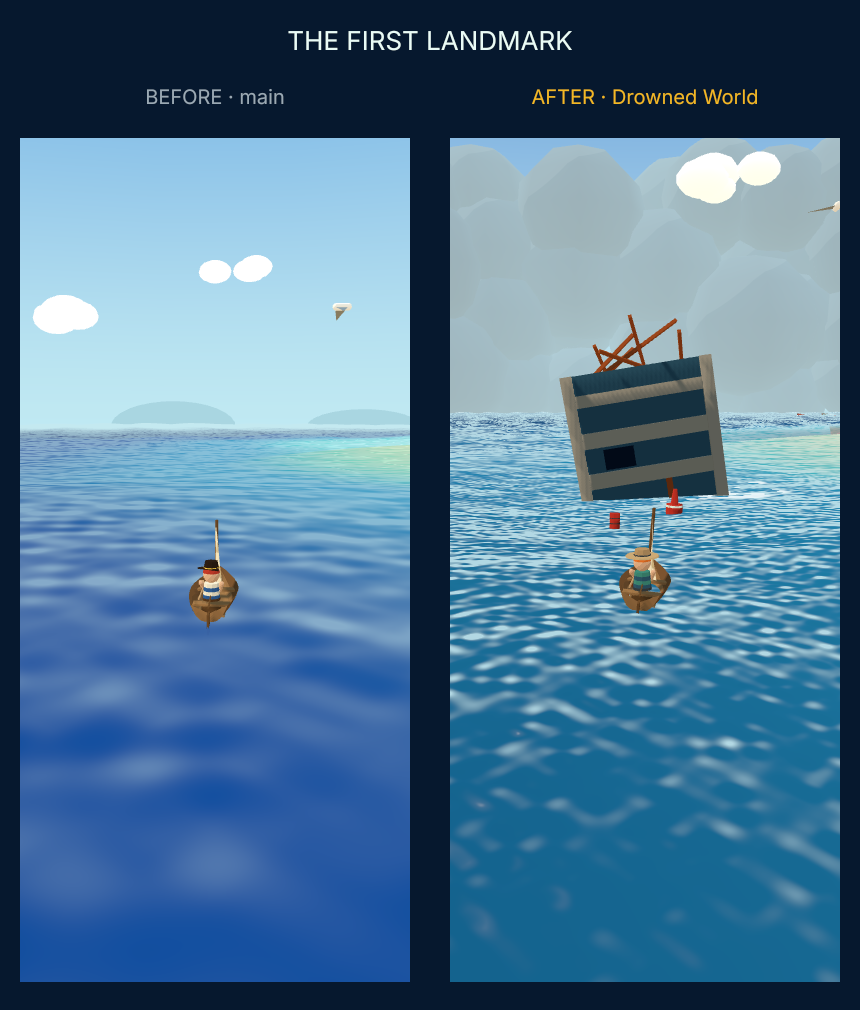
<style>
.page{position:relative;width:860px;height:1010px;background:#06182e}
.page>*{position:absolute;margin:0}
.t1{font:26px "Nunito-Regular";color:#e9fbf6}
.t2{font:20px "Nunito-Regular";color:#9aa9b4}
.t3{font:20px "Nunito-Regular";color:#f2b825}
</style>
<div class="page">
<p class="t1" style="left:287px;top:30px;width:286px;height:22px">THE FIRST LANDMARK</p>
<p class="t2" style="left:146px;top:88px;width:139px;height:18px">BEFORE · main</p>
<p class="t3" style="left:531px;top:89px;width:227px;height:17px">AFTER · Drowned World</p>
</div>
